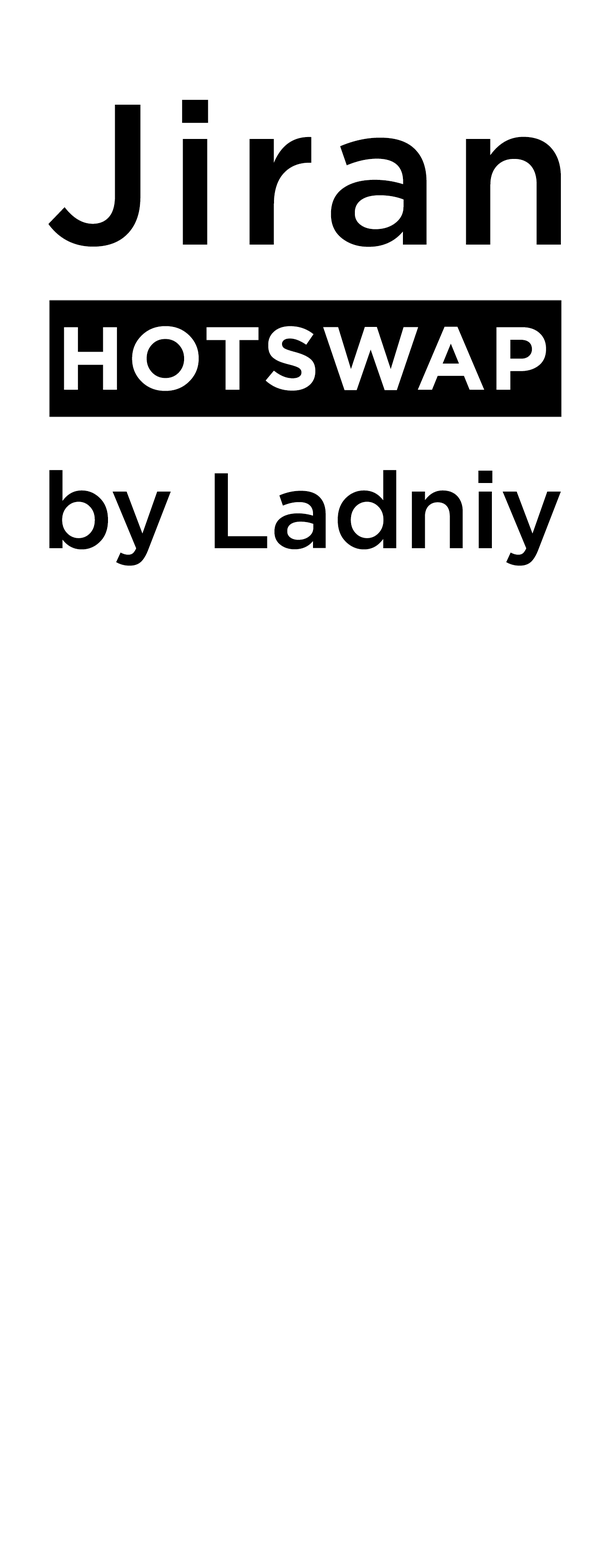
<style>
.page{position:relative;width:607px;height:1568px;background:#ffffff}
.page>*{position:absolute;margin:0}
.t1{font:199.9px "Gotham-Medium";letter-spacing:0.054em;color:#000000}
.t2{font:89.2px "Gotham-Bold";letter-spacing:0.033em;color:#ffffff}
.t3{font:107.1px "Gotham-Medium";letter-spacing:-0.005em;color:#000000}
</style>
<div class="page">
<p class="t1" style="left:48px;top:99px;width:513px;height:148px">Jiran</p>
<p class="t2" style="left:64px;top:326px;width:482px;height:65px">HOTSWAP</p>
<p class="t3" style="left:49px;top:470px;width:512px;height:96px">by Ladniy</p>
</div>
